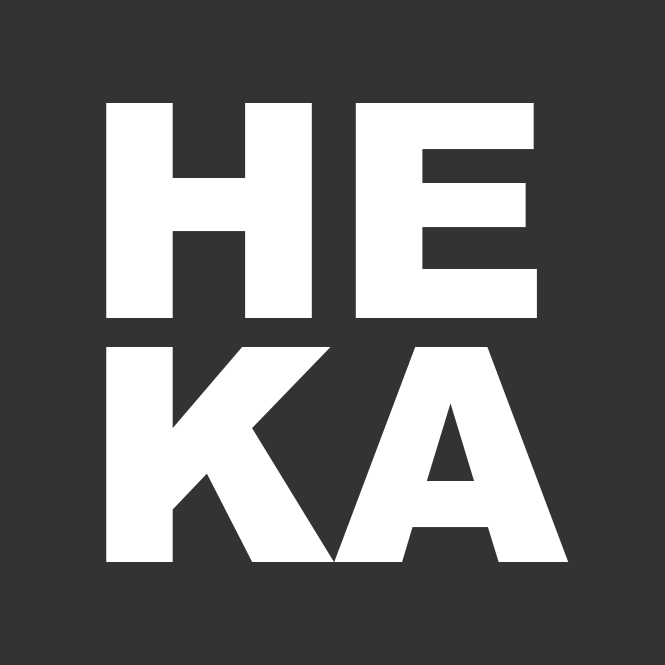
<style>
.page{position:relative;width:665px;height:665px;background:#333333}
.page>*{position:absolute;margin:0}
.t1{font:300px "Arial-Black";color:#ffffff}
</style>
<div class="page">
<p class="t1" style="left:106px;top:103px;width:431px;height:215px">HE</p>
<p class="t1" style="left:106px;top:347px;width:463px;height:215px">KA</p>
</div>
